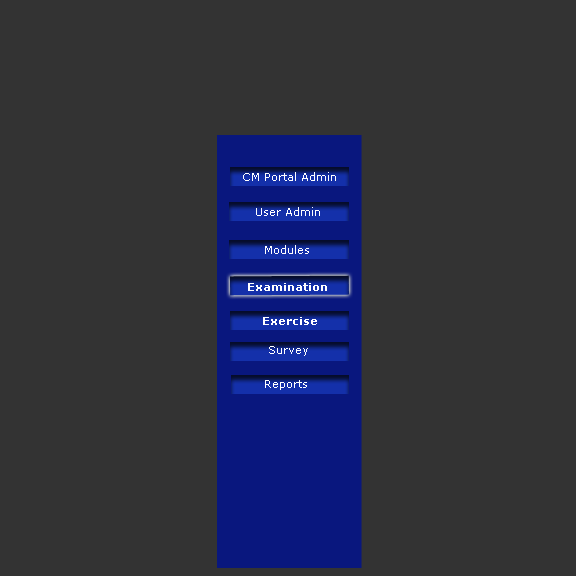
<style>
.page{position:relative;width:576px;height:576px;background:#333333}
.page>*{position:absolute;margin:0}
.t1{font:11px "Verdana";color:#ffffff}
.t2{font:11px "Verdana-Bold";color:#ffffff}
</style>
<div class="page">
<p class="t1" style="left:243px;top:172px;width:93px;height:9px">CM Portal Admin</p>
<p class="t1" style="left:256px;top:207px;width:64px;height:9px">User Admin</p>
<p class="t1" style="left:265px;top:245px;width:44px;height:9px">Modules</p>
<p class="t2" style="left:248px;top:283px;width:79px;height:8px">Examination</p>
<p class="t2" style="left:263px;top:317px;width:54px;height:8px">Exercise</p>
<p class="t1" style="left:269px;top:346px;width:39px;height:10px">Survey</p>
<p class="t1" style="left:265px;top:380px;width:42px;height:10px">Reports</p>
</div>
